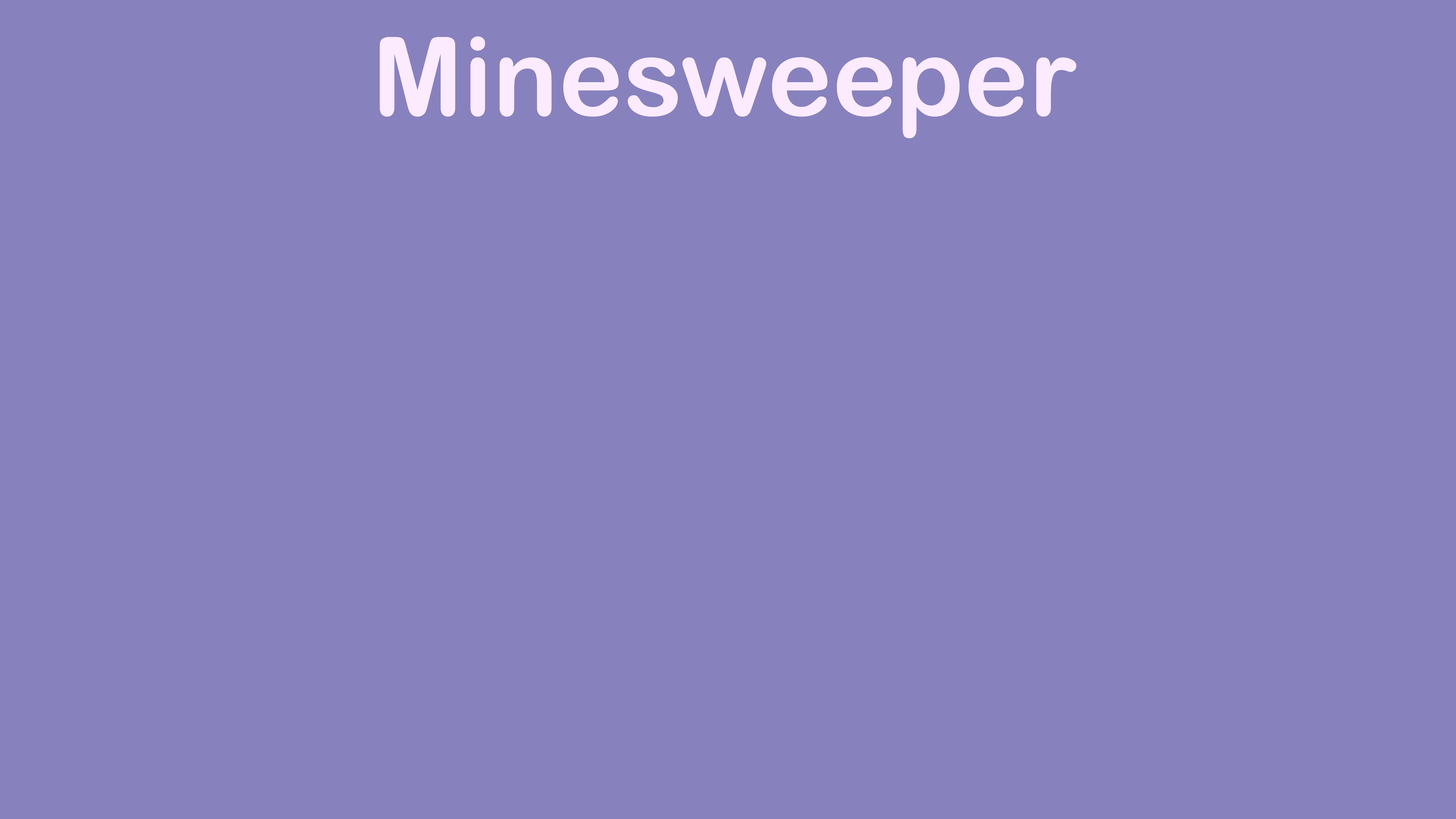
<style>
.page{position:relative;width:1456px;height:819px;background:#8781bd}
.page>*{position:absolute;margin:0}
.t1{font:109.2px "ArialRoundedMTBold";color:#fcebff}
</style>
<div class="page">
<p class="t1" style="left:380px;top:36px;width:696px;height:102px">Minesweeper</p>
</div>
